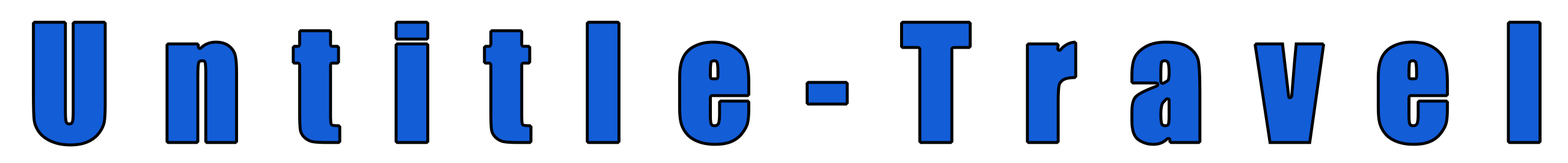
<style>
.page{position:relative;width:1568px;height:163px;background:#ffffff}
.page>*{position:absolute;margin:0}
.t1{font:150.3px "Impact";letter-spacing:0.32em;color:#135dd7;font-weight:bold}
</style>
<div class="page">
<p class="t1" style="left:32px;top:20px;width:1510px;height:127px">Untitle-Travel</p>
</div>
